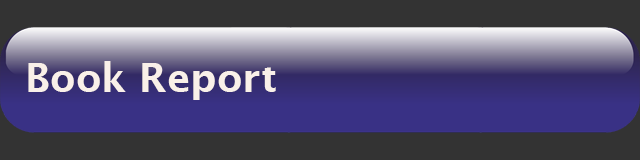
<style>
.page{position:relative;width:640px;height:160px;background:#333333}
.page>*{position:absolute;margin:0}
.t1{font:40px "LucidaSans-Demi";color:#f9f0e9}
</style>
<div class="page">
<p class="t1" style="left:28px;top:61px;width:248px;height:39px">Book Report</p>
</div>
